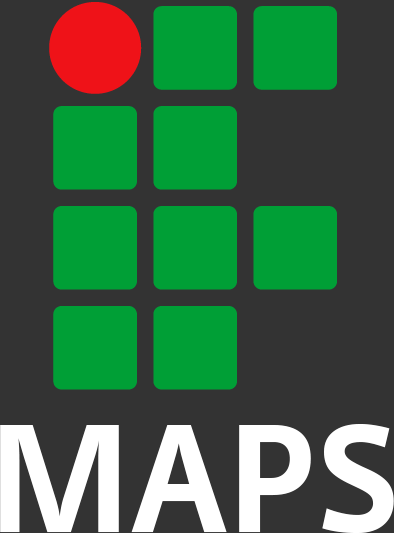
<style>
.page{position:relative;width:394px;height:533px;background:#333333}
.page>*{position:absolute;margin:0}
.t1{font:150px "TipperaryeTextW01-Bold";color:#ffffff}
</style>
<div class="page">
<p class="t1" style="left:0px;top:424px;width:394px;height:109px">MAPS</p>
</div>
